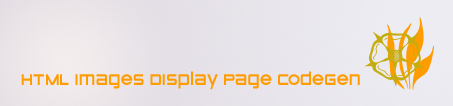
<style>
.page{position:relative;width:453px;height:106px}
.page>*{position:absolute;margin:0}
.t1{font:18px "STOMP_Zeroes";color:#ff9c00}
</style>
<div class="page">
<p class="t1" style="left:21px;top:71px;width:339px;height:19px">HTML Images Display Page CodeGen</p>
</div>
